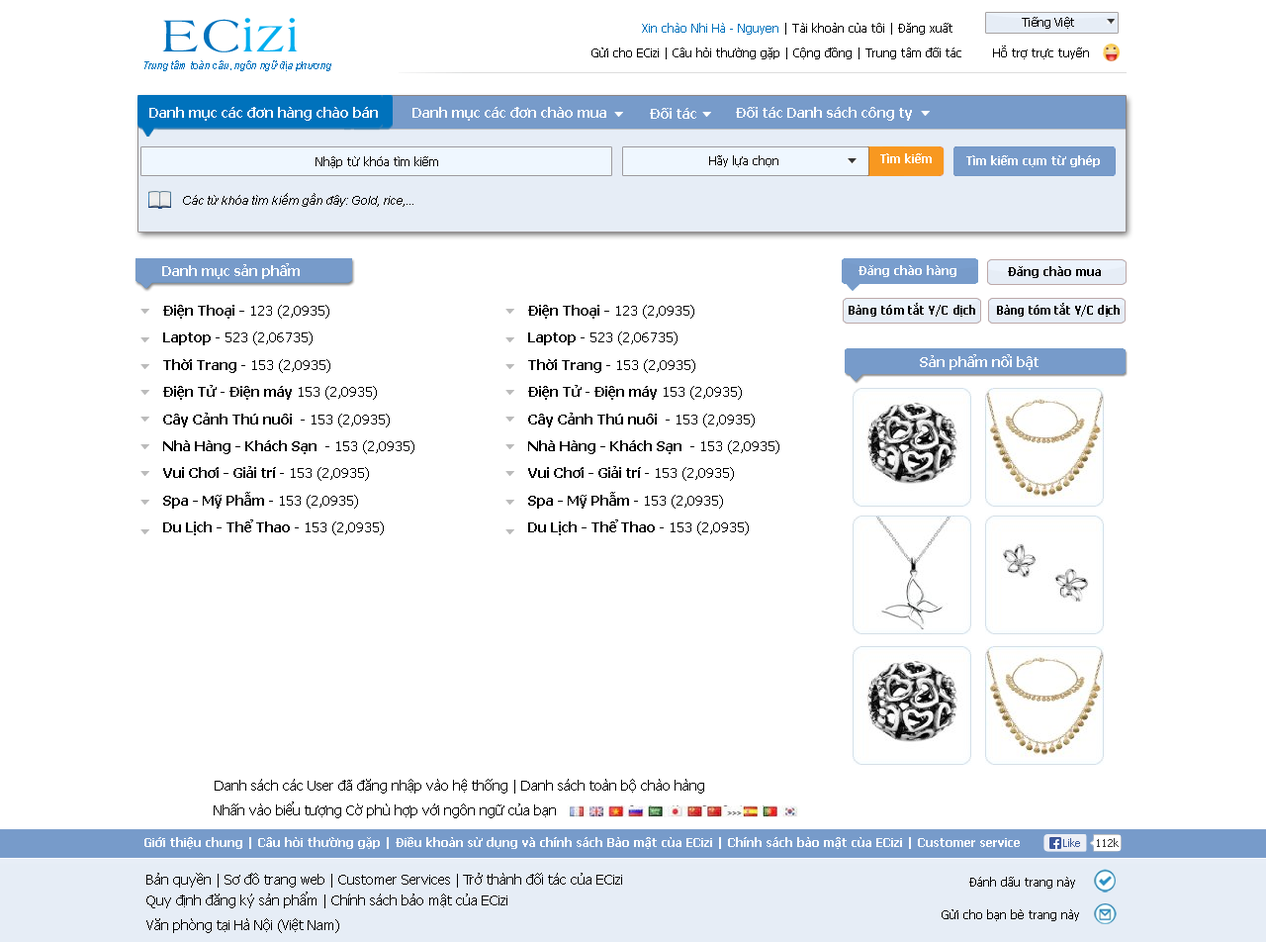
<style>
.page{position:relative;width:1266px;height:942px;background:#ffffff}
.page>*{position:absolute;margin:0}
.t1{font:46.5px "UTM-Amherst";color:#00aeef;scale:1.08 1}
.t2{font:46.5px "UTM-Amherst";color:#0072bc;scale:1.08 1}
.t3{font:11.9px "Tahoma";color:#000000}
.t4{font:11.9px "Tahoma";color:#0072bc}
.t5{font:10.9px "Arial-ItalicMT";color:#0072bc;scale:0.93 1}
.t6{font:13.8px "Tahoma-Bold";color:#ffffff}
.t7{font:11.9px "Tahoma";color:#040404}
.t8{font:11.9px "Tahoma-Bold";color:#ffffff}
.t9{font:11.9px "Arial-ItalicMT";color:#000000}
.t10{font:11.9px "Tahoma-Bold";color:#000000}
.t11{font:13.8px/27.1px "Tahoma-Bold";color:#000000}
.t12{font:13.8px/27.1px "Tahoma";color:#000000}
.t13{font:11.9px "Tahoma-Bold";color:#000000;scale:0.93 1}
.t14{font:11.9px "Tahoma-Bold";color:#000000;scale:0.91 1}
.t15{font:13.8px "Tahoma";color:#000000}
.t16{font:13.8px/21.2px "Tahoma";color:#000000}
</style>
<div class="page">
<p class="t1" style="left:162px;top:18px;width:136px;height:34px"><span class="t2">EC</span>izi</p>
<p class="t3" style="left:1022px;top:17px;width:52px;height:12px">Tiếng Việt</p>
<p class="t3" style="left:642px;top:23px;width:311px;height:12px"><span class="t4">Xin chào Nhi Hà - Nguyen</span> | Tài khoản của tôi | Đăng xuất</p>
<p class="t3" style="left:592px;top:47px;width:370px;height:12px">Gửi cho ECizi | Câu hỏi thường gặp | Cộng đồng | Trung tâm đối tác</p>
<p class="t3" style="left:993px;top:46px;width:96px;height:13px">Hỗ trợ trực tuyến</p>
<p class="t5" style="left:144px;top:60px;width:187px;height:11px">Trung tâm toàn câu, ngôn ngữ địa phương</p>
<p class="t6" style="left:149px;top:107px;width:229px;height:14px">Danh mục các đơn hàng chào bán</p>
<p class="t6" style="left:413px;top:107px;width:193px;height:14px">Danh mục các đơn chào mua</p>
<p class="t6" style="left:650px;top:108px;width:46px;height:11px">Đối tác</p>
<p class="t6" style="left:736px;top:107px;width:176px;height:14px">Đối tác Danh sách công ty</p>
<p class="t7" style="left:316px;top:156px;width:122px;height:12px">Nhập từ khóa tìm kiếm</p>
<p class="t7" style="left:709px;top:155px;width:70px;height:12px">Hãy lựa chọn</p>
<p class="t8" style="left:880px;top:153px;width:52px;height:10px">Tìm kiếm</p>
<p class="t8" style="left:966px;top:155px;width:134px;height:12px">Tìm kiếm cụm từ ghép</p>
<p class="t9" style="left:183px;top:193px;width:230px;height:14px">Các từ khóa tìm kiếm gần đây: Gold, rice,...</p>
<p class="t6" style="left:162px;top:263px;width:138px;height:16px">Danh mục sản phẩm</p>
<p class="t8" style="left:859px;top:265px;width:98px;height:12px">Đăng chào hàng</p>
<p class="t10" style="left:1008px;top:266px;width:93px;height:12px">Đăng chào mua</p>
<p class="t11" style="left:163px;top:305px;width:251px;height:230px">Điện Thoại - <span class="t12">123 (2,0935)<br></span>Laptop <span class="t12">- 523 (2,06735)<br></span>Thời Trang <span class="t12">- 153 (2,0935)<br></span>Điện Tử<span class="t12"> - </span>Điện máy <span class="t12">153 (2,0935)<br></span>Cây Cảnh Thú nuôi  <span class="t12">- 153 (2,0935)<br></span>Nhà Hàng - Khách Sạn  <span class="t12">- 153 (2,0935)<br></span>Vui Chơi - Giải trí<span class="t12"> - 153 (2,0935)<br></span>Spa - Mỹ Phẫm<span class="t12"> - 153 (2,0935)<br></span>Du Lịch - Thể Thao <span class="t12">- 153 (2,0935)</span></p>
<p class="t11" style="left:528px;top:305px;width:252px;height:230px">Điện Thoại - <span class="t12">123 (2,0935)<br></span>Laptop <span class="t12">- 523 (2,06735)<br></span>Thời Trang <span class="t12">- 153 (2,0935)<br></span>Điện Tử<span class="t12"> - </span>Điện máy <span class="t12">153 (2,0935)<br></span>Cây Cảnh Thú nuôi  <span class="t12">- 153 (2,0935)<br></span>Nhà Hàng - Khách Sạn  <span class="t12">- 153 (2,0935)<br></span>Vui Chơi - Giải trí<span class="t12"> - 153 (2,0935)<br></span>Spa - Mỹ Phẫm<span class="t12"> - 153 (2,0935)<br></span>Du Lịch - Thể Thao <span class="t12">- 153 (2,0935)</span></p>
<p class="t13" style="left:849px;top:303px;width:126px;height:14px">Bảng tóm tắt Y/C dịch</p>
<p class="t14" style="left:997px;top:303px;width:123px;height:14px">Bảng tóm tắt Y/C dịch</p>
<p class="t6" style="left:920px;top:354px;width:119px;height:16px">Sản phẩm nổi bật</p>
<p class="t15" style="left:215px;top:779px;width:489px;height:14px">Danh sách các User đã đăng nhập vào hệ thống | Danh sách toàn bộ chào hàng</p>
<p class="t15" style="left:214px;top:801px;width:342px;height:17px">Nhấn vào biểu tượng Cờ phù hợp với ngôn ngữ của bạn</p>
<p class="t8" style="left:144px;top:837px;width:876px;height:12px">Giới thiệu chung | Câu hỏi thường gặp | Điều khoản sử dụng và chính sách Bảo mật của ECizi | Chính sách bảo mật của ECizi | Customer service</p>
<p class="t16" style="left:146px;top:872px;width:476px;height:36px">Bản quyền | Sơ đồ trang web | Customer Services | Trở thành đối tác của ECizi<br>Quy định đăng ký sản phẩm | Chính sách bảo mật của ECizi</p>
<p class="t3" style="left:969px;top:876px;width:106px;height:12px">Đánh dấu trang này</p>
<p class="t15" style="left:146px;top:918px;width:193px;height:15px">Văn phòng tại Hà Nội (Việt Nam)</p>
<p class="t3" style="left:942px;top:909px;width:137px;height:12px">Gửi cho bạn bè trang này</p>
</div>
